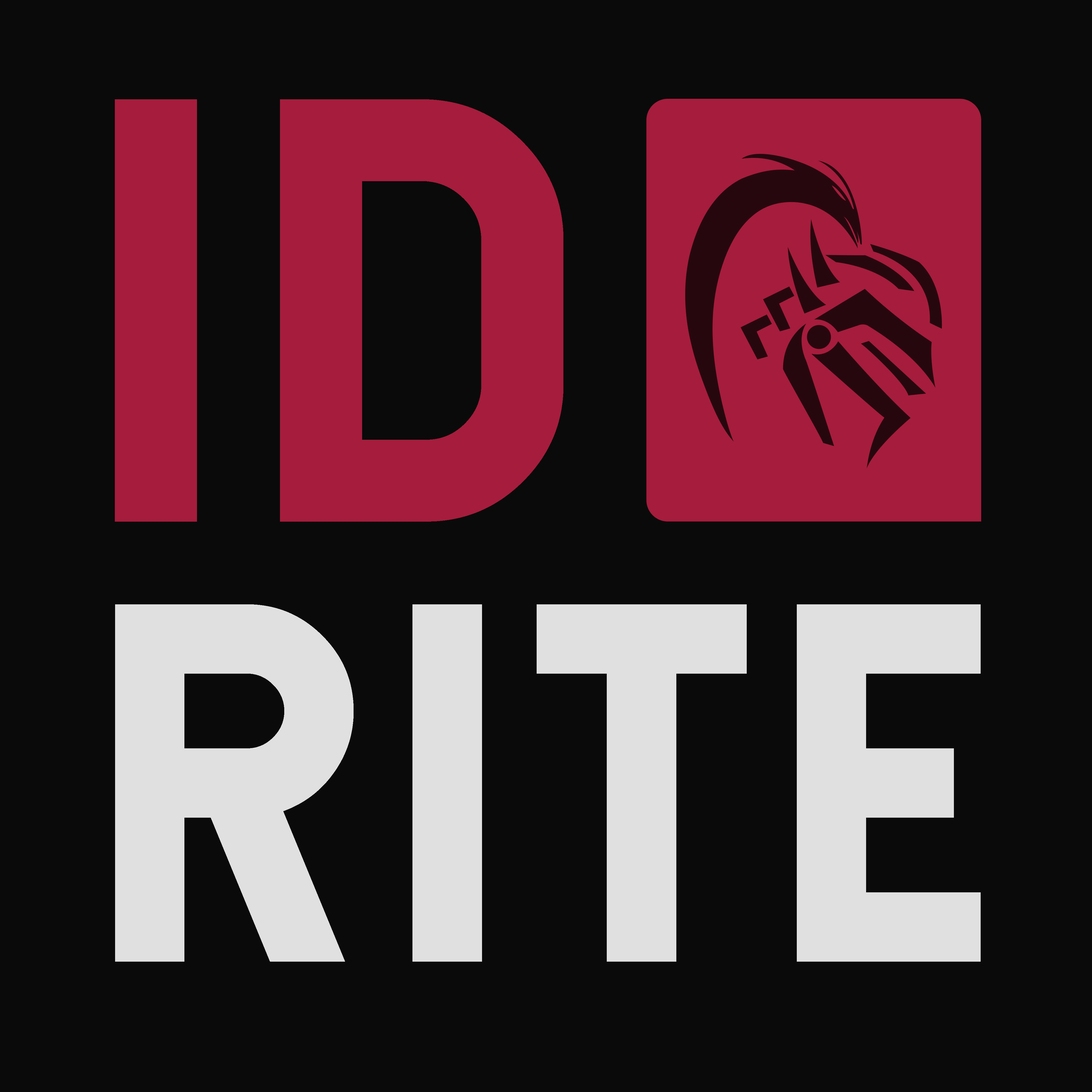
<style>
.page{position:relative;width:1092px;height:1092px;background:#0a0a0a}
.page>*{position:absolute;margin:0}
.t1{font:576.3px "Hansief";color:#a61c3c;text-transform:uppercase}
.t2{font:487.7px/355.5px "Hansief";letter-spacing:0.04em;color:#e0e0e0;text-transform:uppercase}
.t3{font:487.7px/0px "Hansief";letter-spacing:0.04em;color:#e0e0e0;text-transform:uppercase}
</style>
<div class="page">
<p class="t1" style="left:280px;top:99px;width:283px;height:423px">d</p>
<p class="t2" style="left:115px;top:604px;width:866px;height:358px"><span class="t3">ri</span>te<br>a</p>
</div>
